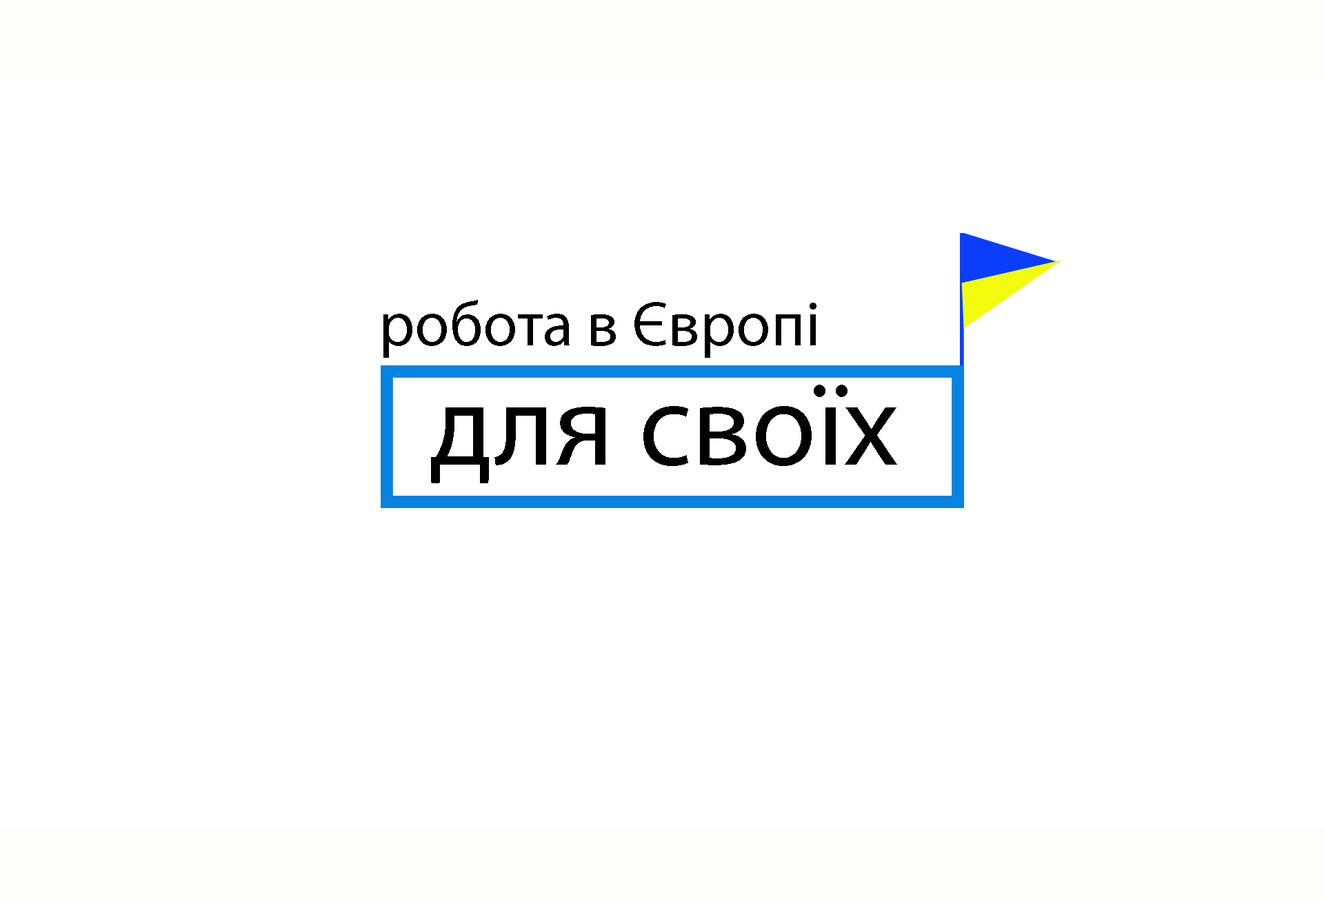
<style>
.page{position:relative;width:1324px;height:901px;background:#ffffff}
.page>*{position:absolute;margin:0}
.t1{font:63.4px "MyriadPro-Regular";color:#000000}
.t2{font:118.6px "MyriadPro-Regular";color:#000000}
</style>
<div class="page">
<p class="t1" style="left:383px;top:300px;width:433px;height:58px">робота в Європі</p>
<p class="t2" style="left:431px;top:385px;width:466px;height:98px">для своїх</p>
</div>
